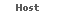
<style>
.page{position:relative;width:72px;height:16px;background:#ffffff}
.page>*{position:absolute;margin:0}
.t1{font:9px "Verdana-Bold";color:#5b5b5b}
</style>
<div class="page">
<p class="t1" style="left:16px;top:4px;width:23px;height:7px">Host</p>
</div>
